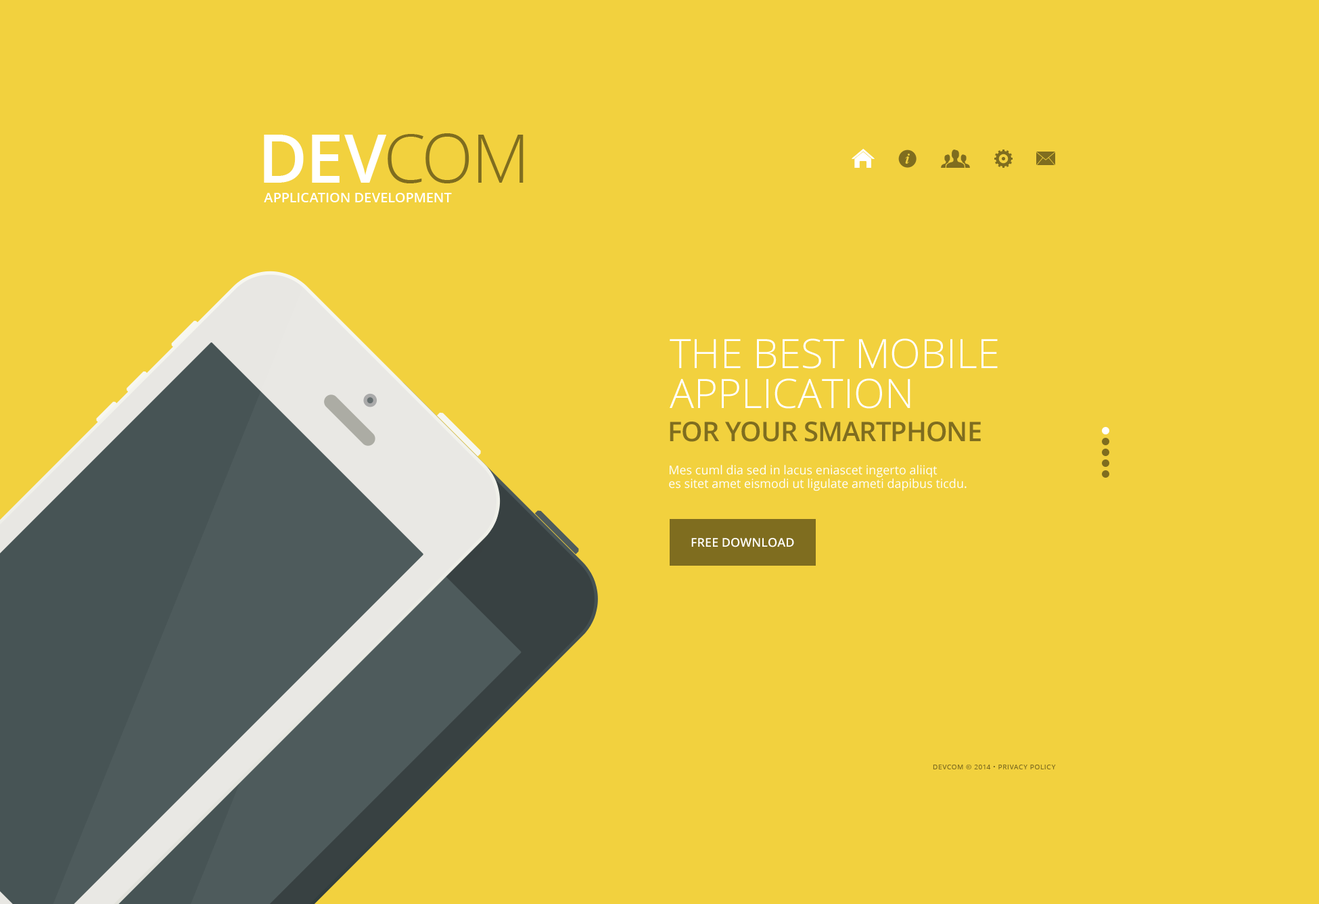
<style>
.page{position:relative;width:1319px;height:904px;background:#f2d13e}
.page>*{position:absolute;margin:0}
.t1{font:67.7px "OpenSans-Semibold";color:#ffffff;text-transform:uppercase}
.t2{font:67.7px "OpenSans-Light";color:#7f6d1f;text-transform:uppercase}
.t3{font:13.5px "OpenSans-Semibold";color:#ffffff;text-transform:uppercase}
.t4{font:40.6px/39.9px "OpenSans-Light";color:#ffffff;text-transform:uppercase}
.t5{font:27.1px "OpenSans-Semibold";letter-spacing:-0.025em;color:#7f6d1f;text-transform:uppercase}
.t6{font:12.2px/10.1px "OpenSans";color:#fefefe}
.t7{font:12.2px "OpenSans-Semibold";color:#ffffff;text-transform:uppercase}
.t8{font:6.8px "OpenSans";letter-spacing:0.06em;color:#7f6d1f;text-transform:uppercase}
</style>
<div class="page">
<p class="t1" style="left:264px;top:133px;width:260px;height:50px">Dev<span class="t2">com</span></p>
<p class="t3" style="left:264px;top:193px;width:188px;height:9px">application development</p>
<p class="t4" style="left:670px;top:338px;width:328px;height:71px">The Best mobile <br>application</p>
<p class="t5" style="left:670px;top:421px;width:311px;height:21px">For Your Smartphone</p>
<p class="t6" style="left:669px;top:465px;width:298px;height:26px">Mes cuml dia sed in lacus eniascet ingerto aliiqt <br>es sitet amet eismodi ut ligulate ameti dapibus ticdu.</p>
<p class="t7" style="left:691px;top:538px;width:103px;height:9px">free Download</p>
<p class="t8" style="left:933px;top:764px;width:123px;height:5px">devcom © 2014 • Privacy Policy</p>
</div>
